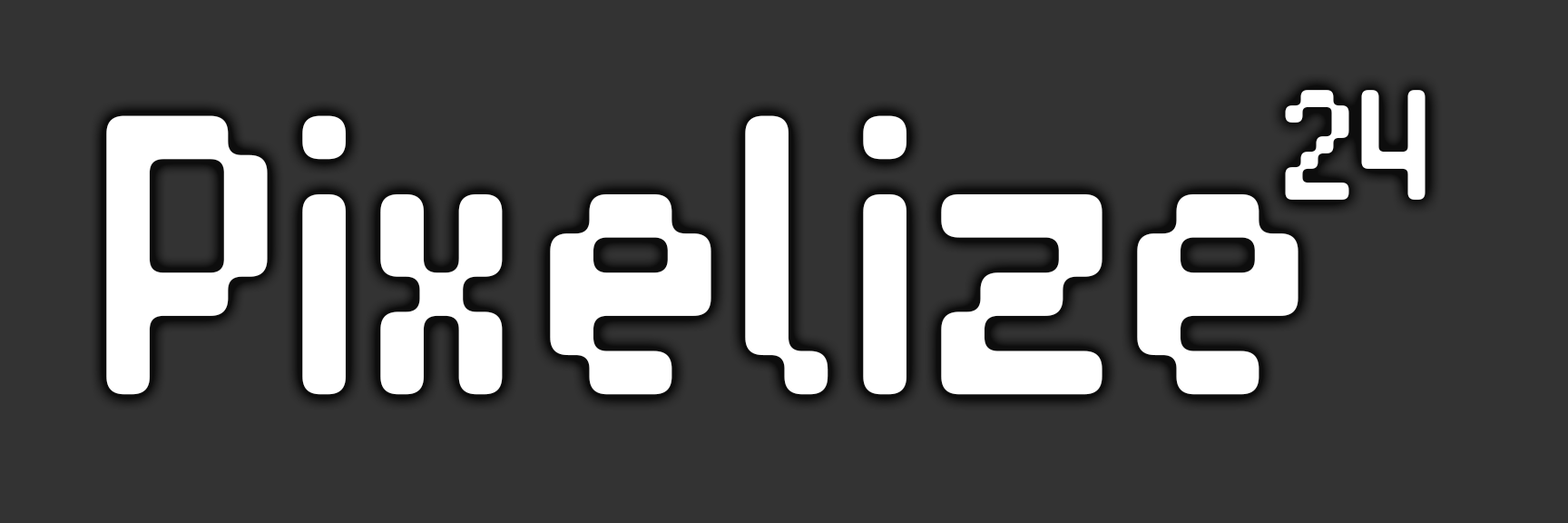
<style>
.page{position:relative;width:1568px;height:523px;background:#333333}
.page>*{position:absolute;margin:0}
.t1{font:157.5px "BlrrpixStrict";color:#ffffff}
.t2{font:401px "BlrrpixStrict";color:#ffffff}
</style>
<div class="page">
<p class="t1" style="left:1285px;top:90px;width:141px;height:110px">24</p>
<p class="t2" style="left:106px;top:115px;width:1192px;height:280px">Pixelize</p>
</div>
